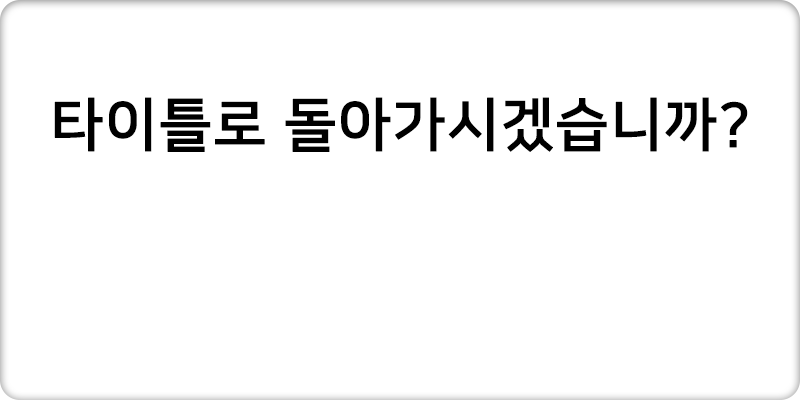
<style>
.page{position:relative;width:800px;height:400px;background:#ffffff}
.page>*{position:absolute;margin:0}
.t1{font:58px "NanumSquareB";color:#000000;font-weight:bold}
</style>
<div class="page">
<p class="t1" style="left:54px;top:97px;width:694px;height:55px">타이틀로 돌아가시겠습니까?</p>
</div>
